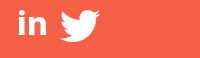
<style>
.page{position:relative;width:200px;height:58px;background:#f66047}
.page>*{position:absolute;margin:0}
.t1{font:36px "MyriadPro-Bold";color:#ffffff}
</style>
<div class="page">
<p class="t1" style="left:19px;top:10px;width:27px;height:25px">in</p>
</div>
